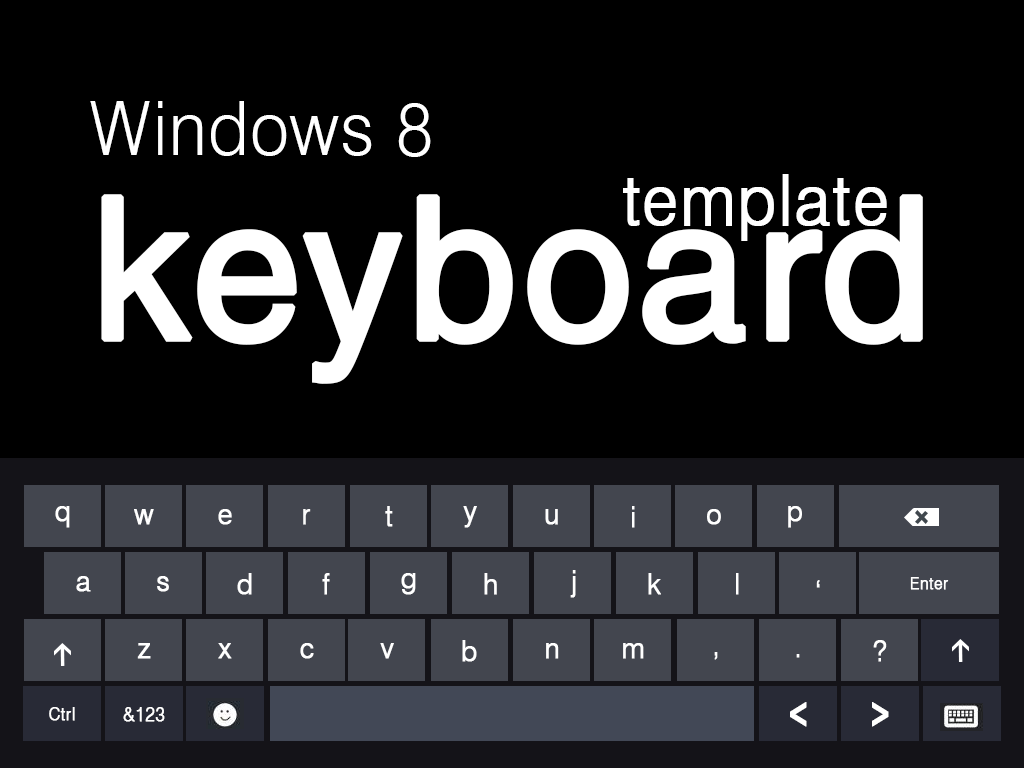
<style>
.page{position:relative;width:1024px;height:768px;background:#000000}
.page>*{position:absolute;margin:0}
.t1{font:75.6px "Swiss721BT-Light";letter-spacing:0.02em;color:#ffffff;scale:0.92 1}
.t2{font:75.6px "Swiss721BT-Light";letter-spacing:0.02em;color:#ffffff;text-transform:uppercase;scale:0.92 1}
.t3{font:70.4px "Swiss721BT-Light";letter-spacing:0.02em;color:#ffffff;font-weight:bold;scale:0.92 1}
.t4{font:198px "HelveticaLTStd-Roman";color:#ffffff;font-weight:bold}
.t5{font:29.4px "Swiss721BT-Light";letter-spacing:0.02em;color:#ffffff;font-weight:bold;scale:0.92 1}
.t6{font:29.4px "Swiss721BT-Light";letter-spacing:0.02em;color:#fafafa;font-weight:bold;scale:0.92 1}
.t7{font:16.8px "Swiss721BT-Light";letter-spacing:0.02em;color:#ffffff;font-weight:bold;scale:0.92 1}
.t8{font:16.8px "Swiss721BT-Light";letter-spacing:0.02em;color:#ffffff;text-transform:uppercase;font-weight:bold;scale:0.92 1}
.t9{font:40.3px "Swiss721BT-Heavy";letter-spacing:0.02em;color:#ffffff;font-weight:bold;scale:0.67 1}
.t10{font:17.9px "Swiss721BT-Light";letter-spacing:0.02em;color:#ffffff;font-weight:bold;scale:0.92 1}
.t11{font:17.9px "Swiss721BT-Light";letter-spacing:0.02em;color:#ffffff;text-transform:uppercase;font-weight:bold;scale:0.92 1}
.t12{font:18.9px "Swiss721BT-Light";letter-spacing:0.02em;color:#ffffff;font-weight:bold;scale:0.92 1}
</style>
<div class="page">
<p class="t1" style="left:90px;top:101px;width:341px;height:56px"><span class="t2">w</span>indows 8</p>
<p class="t3" style="left:623px;top:174px;width:264px;height:67px">template</p>
<p class="t4" style="left:101px;top:194px;width:822px;height:190px">keyboard</p>
<p class="t5" style="left:55px;top:506px;width:15px;height:22px">q</p>
<p class="t5" style="left:134px;top:509px;width:20px;height:16px">w</p>
<p class="t5" style="left:218px;top:509px;width:14px;height:16px">e</p>
<p class="t6" style="left:303px;top:509px;width:8px;height:16px">r</p>
<p class="t5" style="left:385px;top:506px;width:8px;height:21px">t</p>
<p class="t5" style="left:463px;top:506px;width:14px;height:22px">y</p>
<p class="t5" style="left:545px;top:509px;width:13px;height:16px">u</p>
<p class="t5" style="left:632px;top:506px;width:3px;height:22px">i</p>
<p class="t5" style="left:707px;top:509px;width:14px;height:16px">o</p>
<p class="t5" style="left:788px;top:506px;width:14px;height:22px">p</p>
<p class="t5" style="left:76px;top:576px;width:15px;height:16px">a</p>
<p class="t5" style="left:157px;top:576px;width:12px;height:16px">s</p>
<p class="t5" style="left:237px;top:573px;width:15px;height:22px">d</p>
<p class="t5" style="left:322px;top:573px;width:8px;height:22px">f</p>
<p class="t5" style="left:401px;top:573px;width:15px;height:22px">g</p>
<p class="t5" style="left:484px;top:573px;width:13px;height:22px">h</p>
<p class="t5" style="left:570px;top:570px;width:6px;height:28px">j</p>
<p class="t5" style="left:648px;top:573px;width:13px;height:22px">k</p>
<p class="t5" style="left:736px;top:573px;width:3px;height:22px">l</p>
<p class="t5" style="left:816px;top:580px;width:4px;height:8px">‘</p>
<p class="t7" style="left:910px;top:577px;width:39px;height:13px"><span class="t8">e</span>nter</p>
<p class="t5" style="left:462px;top:640px;width:15px;height:22px">b</p>
<p class="t5" style="left:873px;top:640px;width:14px;height:22px">?</p>
<p class="t5" style="left:137px;top:643px;width:14px;height:16px">z</p>
<p class="t5" style="left:218px;top:643px;width:14px;height:16px">x</p>
<p class="t5" style="left:300px;top:643px;width:14px;height:16px">c</p>
<p class="t5" style="left:380px;top:643px;width:14px;height:16px">v</p>
<p class="t5" style="left:546px;top:643px;width:13px;height:16px">n</p>
<p class="t5" style="left:623px;top:643px;width:21px;height:16px">m</p>
<p class="t5" style="left:714px;top:652px;width:4px;height:8px">,</p>
<p class="t5" style="left:796px;top:654px;width:4px;height:4px">.</p>
<p class="t9" style="left:790px;top:702px;width:17px;height:25px">&lt;</p>
<p class="t9" style="left:872px;top:702px;width:17px;height:25px">&gt;</p>
<p class="t10" style="left:49px;top:707px;width:26px;height:14px"><span class="t11">c</span>trl</p>
<p class="t12" style="left:123px;top:707px;width:42px;height:15px">&amp;123</p>
</div>
